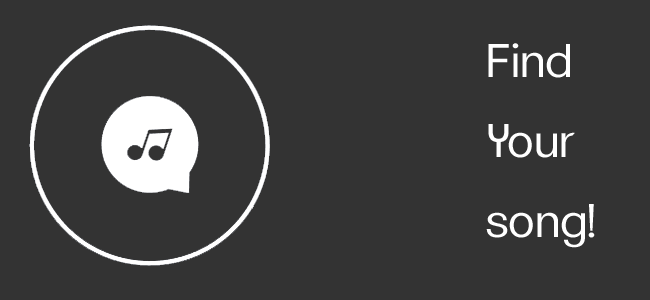
<style>
.page{position:relative;width:650px;height:300px;background:#333333}
.page>*{position:absolute;margin:0}
.t1{font:45.8px "ClementePDag-Book";color:#ffffff}
</style>
<div class="page">
<p class="t1" style="left:486px;top:43px;width:109px;height:205px">Find<br>Your<br>song!</p>
</div>
